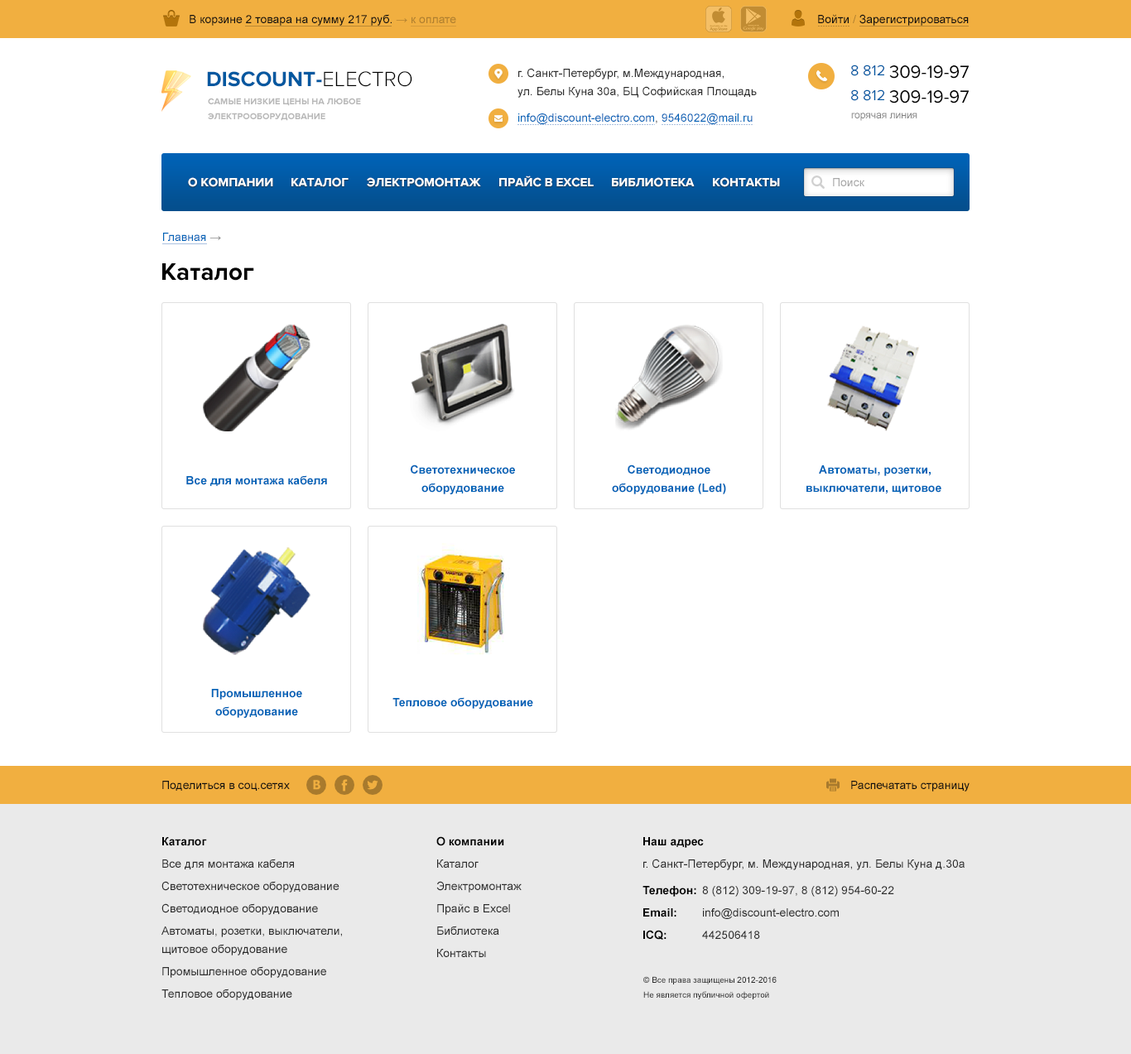
<style>
.page{position:relative;width:1131px;height:1054px;background:#ffffff}
.page>*{position:absolute;margin:0}
.t1{font:11.6px "ArialMT";color:#0f0f0f}
.t2{font:11.6px "ArialMT";color:#b0802f}
.t3{font:18.2px "ProximaNova-Regular";color:#000000;text-transform:uppercase}
.t4{font:14.9px "ProximaNova-Regular";color:#0259a2;text-transform:uppercase}
.t5{font:21.5px "ProximaNova-Bold";color:#0258a0;text-transform:uppercase}
.t6{font:21.5px "ProximaNova-Light";color:#000000;text-transform:uppercase}
.t7{font:11.6px/18.2px "ArialMT";color:#2c2c2c}
.t8{font:11.6px/18.2px "ArialMT";color:#0063b7}
.t9{font:9.1px/14.9px "ProximaNova-Bold";color:#b8b8b8;text-transform:uppercase}
.t10{font:9.9px "ArialMT";color:#818181}
.t11{font:12.4px "ProximaNova-Bold";color:#ffffff;text-transform:uppercase}
.t12{font:11.6px "ArialMT";color:#a8a8a8}
.t13{font:11.6px "ArialMT";color:#0063b7}
.t14{font:11.6px "ArialMT";color:#818181}
.t15{font:24.8px "ProximaNova-Bold";color:#000000}
.t16{font:11.6px/18.2px "Arial-BoldMT";color:#0063b7}
.t17{font:11.6px "Arial-BoldMT";color:#0063b7}
.t18{font:11.6px/18.2px "Arial-BoldMT";color:#000000}
.t19{font:8.3px/14.9px "ArialMT";color:#2c2c2c}
</style>
<div class="page">
<p class="t1" style="left:190px;top:14px;width:266px;height:12px">В корзине 2 товара на сумму 217 руб. <span class="t2">→</span><span class="t2"> к оплате</span></p>
<p class="t1" style="left:818px;top:14px;width:151px;height:12px">Войти<span class="t2"> /</span> Зарегистрироваться</p>
<p class="t3" style="left:851px;top:65px;width:118px;height:14px"><span class="t4">8 812 </span>309-19-97</p>
<p class="t5" style="left:207px;top:71px;width:205px;height:16px">Discount-<span class="t6">electro</span></p>
<p class="t7" style="left:518px;top:68px;width:239px;height:56px">г. Санкт-Петербург, м.Международная,<br>ул. Белы Куна 30а, БЦ Софийская Площадь<br><span class="t8">info@discount-electro.com</span>, <span class="t8">9546022@mail.ru</span></p>
<p class="t3" style="left:851px;top:89px;width:118px;height:15px"><span class="t4">8 812 </span>309-19-97</p>
<p class="t9" style="left:208px;top:98px;width:153px;height:23px">самые низкие цены на любое<br>электрооборудование</p>
<p class="t10" style="left:851px;top:113px;width:67px;height:8px">горячая линия</p>
<p class="t11" style="left:188px;top:177px;width:85px;height:10px">О компании</p>
<p class="t11" style="left:291px;top:177px;width:58px;height:10px">Каталог</p>
<p class="t11" style="left:367px;top:177px;width:114px;height:10px">Электромонтаж</p>
<p class="t11" style="left:499px;top:176px;width:95px;height:11px">Прайс в Excel</p>
<p class="t11" style="left:612px;top:177px;width:83px;height:10px">Библиотека</p>
<p class="t11" style="left:713px;top:177px;width:67px;height:10px">Контакты</p>
<p class="t12" style="left:833px;top:178px;width:32px;height:8px">Поиск</p>
<p class="t13" style="left:163px;top:233px;width:58px;height:8px">Главная<span class="t14"> →</span></p>
<p class="t15" style="left:162px;top:263px;width:92px;height:18px">Каталог</p>
<p class="t16" style="left:411px;top:465px;width:104px;height:29px;text-align:center">Светотехническое<br>оборудование</p>
<p class="t16" style="left:612px;top:465px;width:114px;height:29px;text-align:center">Светодиодное<br>оборудование (Led)</p>
<p class="t16" style="left:807px;top:465px;width:135px;height:29px;text-align:center">Автоматы, розетки,<br>выключатели, щитовое</p>
<p class="t17" style="left:186px;top:475px;width:141px;height:11px">Все для монтажа кабеля</p>
<p class="t16" style="left:211px;top:689px;width:91px;height:29px;text-align:center">Промышленное<br>оборудование</p>
<p class="t17" style="left:393px;top:697px;width:140px;height:12px">Тепловое оборудование</p>
<p class="t1" style="left:162px;top:781px;width:128px;height:10px">Поделиться в соц.сетях</p>
<p class="t1" style="left:851px;top:781px;width:119px;height:11px">Распечатать страницу</p>
<p class="t7" style="left:161px;top:837px;width:181px;height:163px"><span class="t18">Каталог<br></span>Все для монтажа кабеля<br>Светотехническое оборудование<br>Светодиодное оборудование<br>Автоматы, розетки, выключатели,<br>щитовое оборудование<br>Промышленное оборудование<br>Тепловое оборудование</p>
<p class="t7" style="left:436px;top:836px;width:86px;height:121px"><span class="t18">О компании<br></span>Каталог<br>Электромонтаж<br>Прайс в Excel<br>Библиотека<br>Контакты</p>
<p class="t7" style="left:643px;top:837px;width:322px;height:103px"><span class="t18">Наш адрес<br></span>г. Санкт-Петербург, м. Международная, ул. Белы Куна д.30а<br><span class="t18">Телефон:  </span>8 (812) 309-19-97, 8 (812) 954-60-22<br><span class="t18">Email: </span>info@discount-electro.com<br><span class="t18">ICQ:  </span>442506418</p>
<p class="t19" style="left:643px;top:976px;width:134px;height:24px">© Все права защищены 2012-2016<br>Не является публичной офертой</p>
</div>
